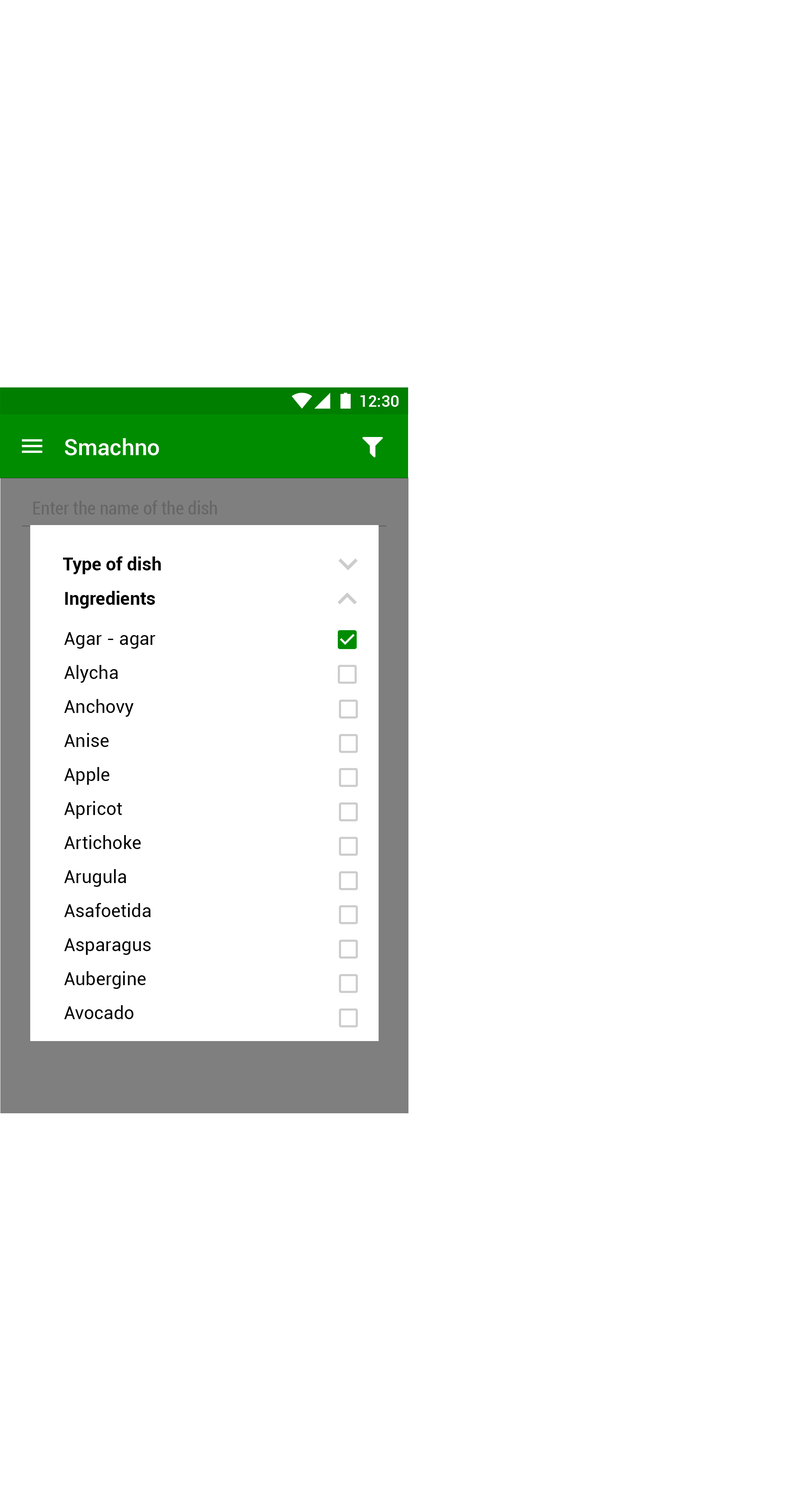
<style>
.page{position:relative;width:795px;height:1500px;background:#ffffff}
.page>*{position:absolute;margin:0}
.t1{font:15.9px "Roboto-Medium";color:#ffffff}
.t2{font:22.7px "Roboto-Medium";color:#ffffff}
.t3{font:18.1px "Roboto-Condensed";color:#666666}
.t4{font:18.1px "Roboto-Bold";color:#000000}
.t5{font:18.1px/34px "Roboto-Regular";color:#000000}
</style>
<div class="page">
<p class="t1" style="left:361px;top:395px;width:38px;height:12px">12:30</p>
<p class="t2" style="left:65px;top:438px;width:94px;height:17px">Smachno</p>
<p class="t3" style="left:33px;top:500px;width:184px;height:14px">Enter the name of the dish</p>
<p class="t4" style="left:63px;top:556px;width:98px;height:18px">Type of dish</p>
<p class="t4" style="left:65px;top:591px;width:90px;height:17px">Ingredients</p>
<p class="t5" style="left:64px;top:632px;width:91px;height:387px">Agar - agar<br>Alycha<br>Anchovy<br>Anise<br>Apple<br>Apricot<br>Artichoke<br>Arugula<br>Asafoetida<br>Asparagus<br>Aubergine<br>Avocado</p>
</div>
